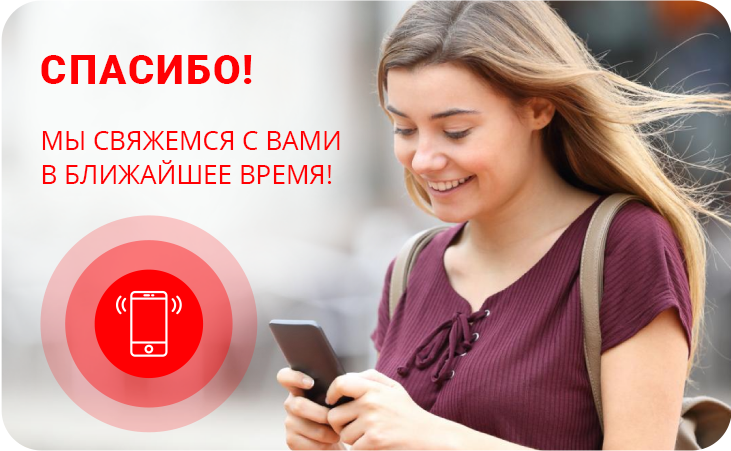
<style>
.page{position:relative;width:731px;height:451px}
.page>*{position:absolute;margin:0}
.t1{font:26px/34px "OpenSans";color:#ff0003}
.t2{font:40px/38.4px "Roboto-Black";letter-spacing:0.05em;color:#ff0003;text-transform:uppercase}
</style>
<div class="page">
<p class="t1" style="left:41px;top:55px;width:299px;height:129px"><span class="t2">СПАСИБО! <br><br></span>МЫ СВЯЖЕМСЯ С ВАМИ<br>В БЛИЖАЙШЕЕ ВРЕМЯ!</p>
</div>
